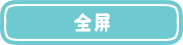
<style>
.page{position:relative;width:183px;height:45px;background:#6ecad0}
.page>*{position:absolute;margin:0}
.t1{font:12px "shetumodengxiaofangti";color:#ffffff;font-weight:bold;scale:0.94 1}
</style>
<div class="page">
<p class="t1" style="left:74px;top:13px;width:36px;height:19px">全屏</p>
</div>
